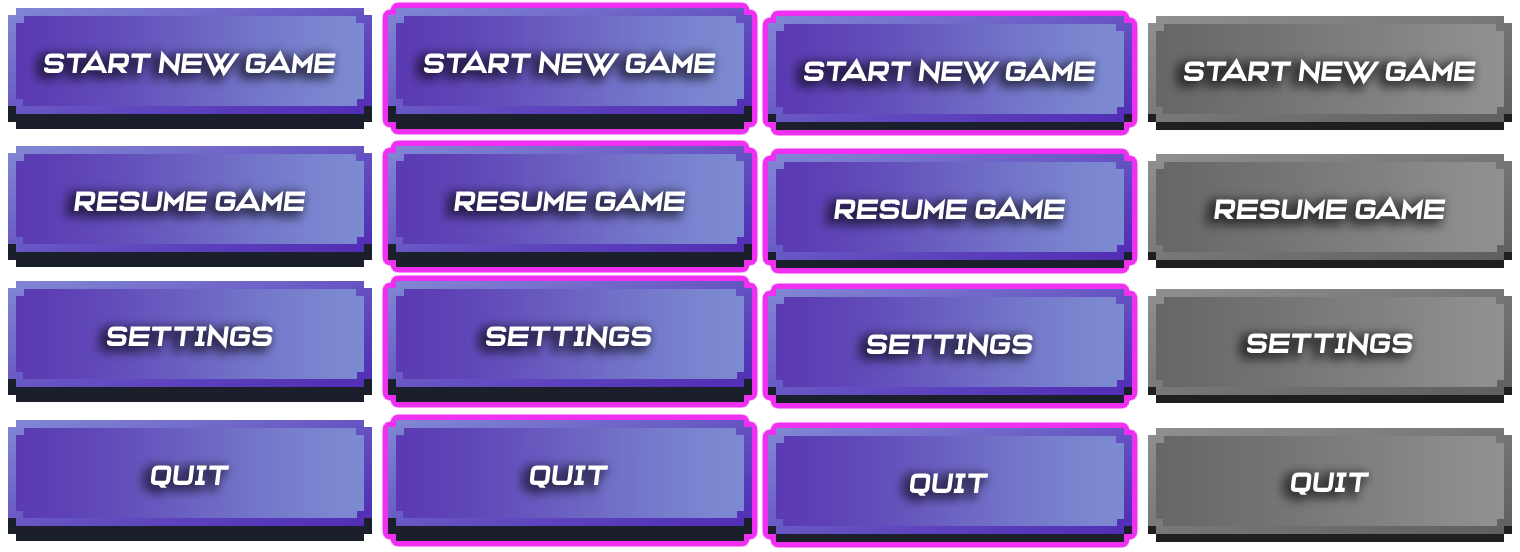
<style>
.page{position:relative;width:1520px;height:552px}
.page>*{position:absolute;margin:0}
.t1{font:28.5px "VeniteAdoremus";color:#ffffff}
</style>
<div class="page">
<p class="t1" style="left:44px;top:50px;width:292px;height:27px">Start new game</p>
<p class="t1" style="left:424px;top:50px;width:292px;height:27px">Start new game</p>
<p class="t1" style="left:804px;top:58px;width:292px;height:27px">Start new game</p>
<p class="t1" style="left:1184px;top:58px;width:292px;height:27px">Start new game</p>
<p class="t1" style="left:74px;top:187px;width:232px;height:24px">RESUME game</p>
<p class="t1" style="left:454px;top:187px;width:232px;height:24px">RESUME game</p>
<p class="t1" style="left:834px;top:195px;width:232px;height:24px">RESUME game</p>
<p class="t1" style="left:1214px;top:195px;width:232px;height:24px">RESUME game</p>
<p class="t1" style="left:106px;top:323px;width:168px;height:26px">SETTINGS</p>
<p class="t1" style="left:485px;top:323px;width:168px;height:26px">SETTINGS</p>
<p class="t1" style="left:866px;top:331px;width:168px;height:26px">SETTINGS</p>
<p class="t1" style="left:1246px;top:330px;width:168px;height:26px">SETTINGS</p>
<p class="t1" style="left:150px;top:465px;width:80px;height:23px">QUIT</p>
<p class="t1" style="left:529px;top:465px;width:80px;height:23px">QUIT</p>
<p class="t1" style="left:909px;top:473px;width:80px;height:23px">QUIT</p>
<p class="t1" style="left:1290px;top:472px;width:80px;height:23px">QUIT</p>
</div>
